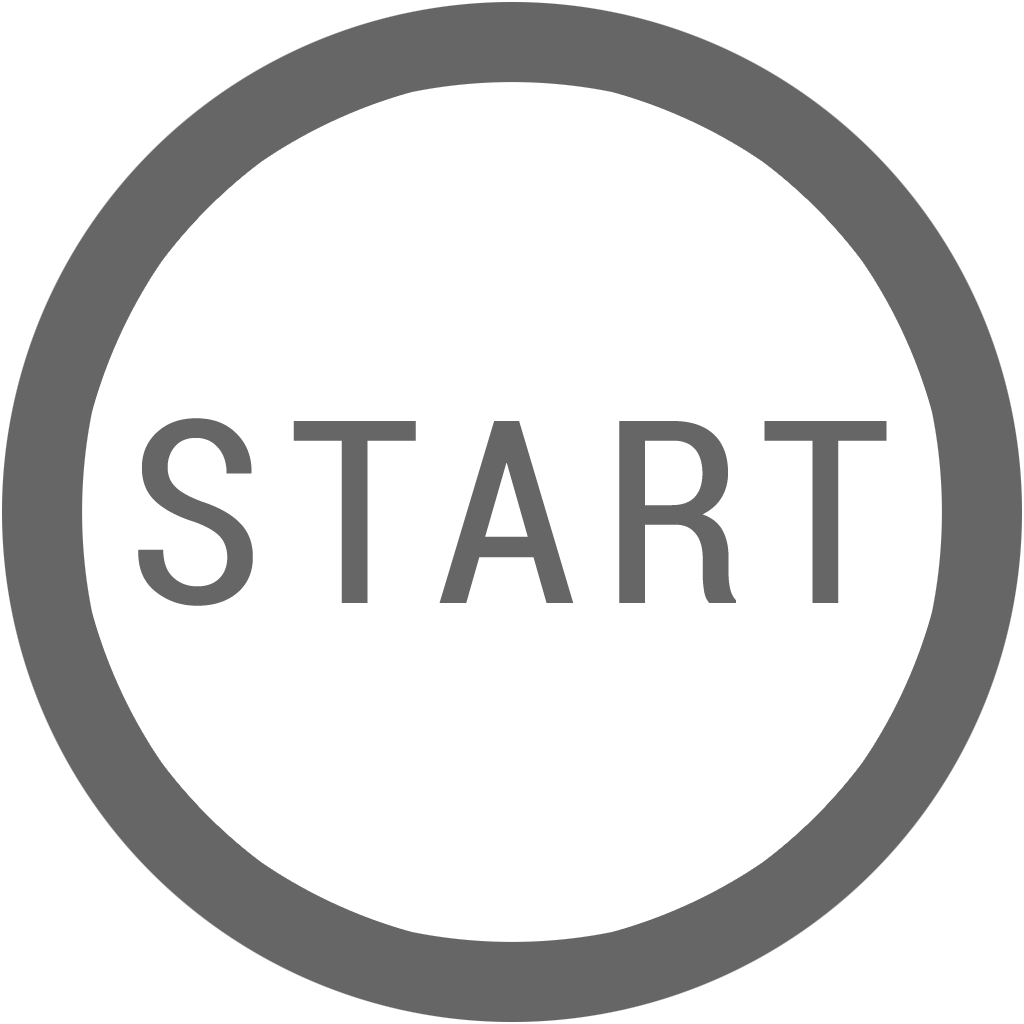
<style>
.page{position:relative;width:1024px;height:1024px;background:#ffffff}
.page>*{position:absolute;margin:0}
.t1{font:256px "Roboto-Condensed";letter-spacing:0.1em;color:#666666}
</style>
<div class="page">
<p class="t1" style="left:138px;top:418px;width:749px;height:188px">START</p>
</div>
